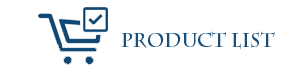
<style>
.page{position:relative;width:303px;height:77px;background:#ffffff}
.page>*{position:absolute;margin:0}
.t1{font:18.7px "CharlemagneStd-Bold";color:#194e78}
</style>
<div class="page">
<p class="t1" style="left:121px;top:31px;width:154px;height:19px">Product List</p>
</div>
